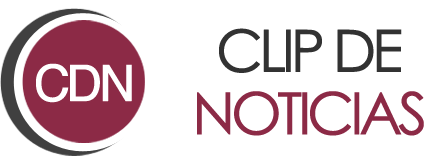
<style>
.page{position:relative;width:424px;height:165px;background:#ffffff}
.page>*{position:absolute;margin:0}
.t1{font:58.3px "CenturyGothic";letter-spacing:-0.1em;color:#323232;font-weight:bold}
.t2{font:50px "Helvetica";letter-spacing:-0.1em;color:#ffffff;font-weight:bold}
.t3{font:58.3px "CenturyGothic";letter-spacing:-0.1em;color:#8c2a46;font-weight:bold}
</style>
<div class="page">
<p class="t1" style="left:219px;top:28px;width:183px;height:45px">CLIP DE</p>
<p class="t2" style="left:36px;top:63px;width:96px;height:40px">CDN</p>
<p class="t3" style="left:197px;top:91px;width:227px;height:45px">NOTICIAS</p>
</div>
